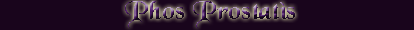
<style>
.page{position:relative;width:414px;height:30px;background:#19051c}
.page>*{position:absolute;margin:0}
.t1{font:28px "BlackChancery"}
.t2{font:24.8px "BlackChancery"}
</style>
<div class="page">
<p class="t1" style="left:125px;top:1px;width:170px;height:27px"><span class="t2">             </span>Phos Prostatìs</p>
</div>
